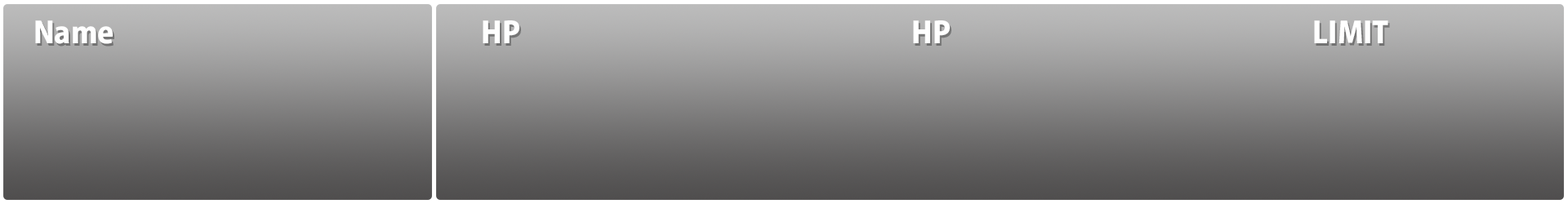
<style>
.page{position:relative;width:1568px;height:204px}
.page>*{position:absolute;margin:0}
.t1{font:29.4px "KozGoPr6N-Heavy";color:#ffffff}
</style>
<div class="page">
<p class="t1" style="left:35px;top:20px;width:78px;height:24px">Name</p>
<p class="t1" style="left:483px;top:20px;width:36px;height:23px">HP</p>
<p class="t1" style="left:913px;top:20px;width:37px;height:23px">HP</p>
<p class="t1" style="left:1314px;top:20px;width:74px;height:23px">LIMIT</p>
</div>
